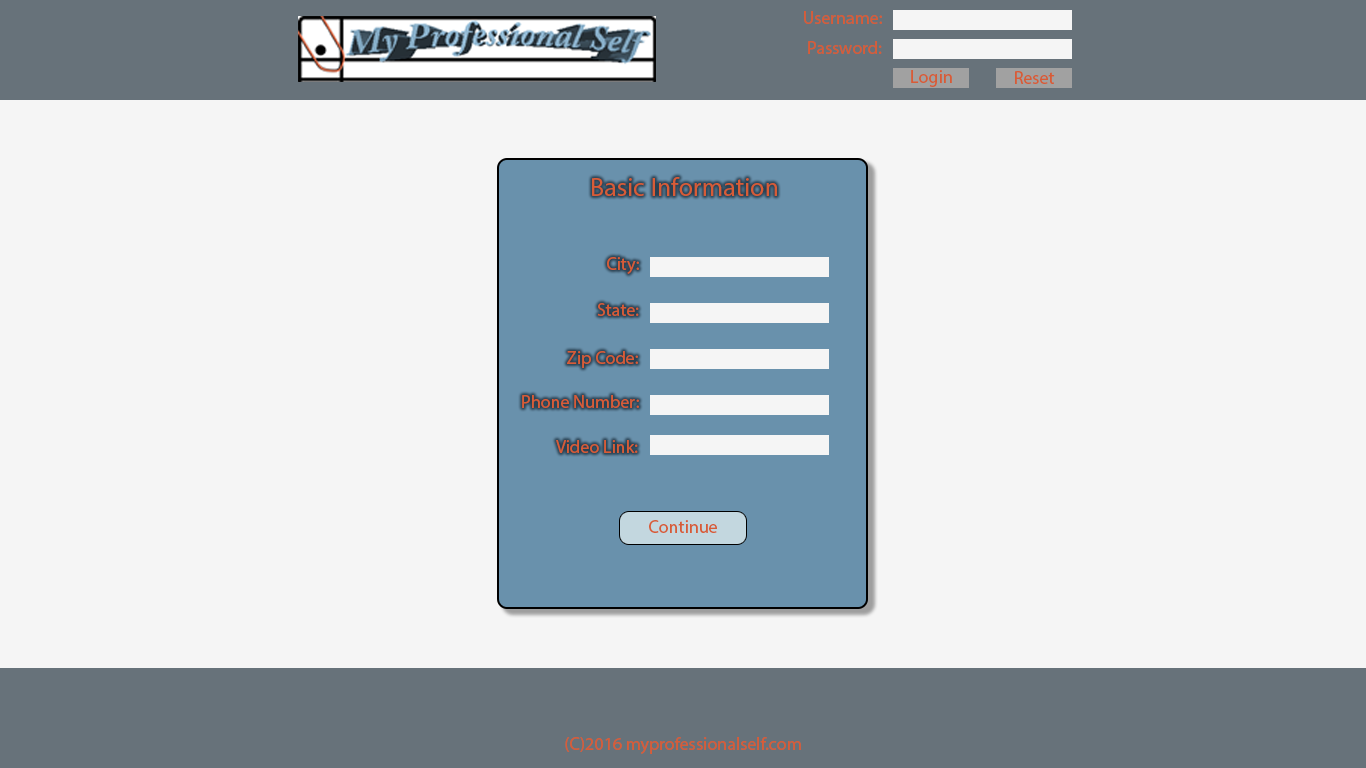
<style>
.page{position:relative;width:1366px;height:768px;background:#f5f5f5}
.page>*{position:absolute;margin:0}
.t1{font:18px "MyriadPro-Regular";color:#d75c37}
.t2{font:26px "MyriadPro-Regular";color:#d75c37}
</style>
<div class="page">
<p class="t1" style="left:804px;top:11px;width:78px;height:13px">Username:</p>
<p class="t1" style="left:808px;top:41px;width:74px;height:13px">Password:</p>
<p class="t1" style="left:911px;top:70px;width:41px;height:17px">Login</p>
<p class="t1" style="left:1015px;top:71px;width:40px;height:13px">Reset</p>
<p class="t2" style="left:592px;top:177px;width:185px;height:19px">Basic Information</p>
<p class="t1" style="left:607px;top:257px;width:32px;height:17px">City:</p>
<p class="t1" style="left:597px;top:303px;width:42px;height:13px">State:</p>
<p class="t1" style="left:567px;top:351px;width:71px;height:17px">Zip Code:</p>
<p class="t1" style="left:522px;top:395px;width:117px;height:13px">Phone Number:</p>
<p class="t1" style="left:556px;top:440px;width:82px;height:13px">Video Link:</p>
<p class="t1" style="left:649px;top:520px;width:68px;height:13px">Continue</p>
<p class="t1" style="left:565px;top:737px;width:236px;height:17px">(C)2016 myprofessionalself.com</p>
</div>
